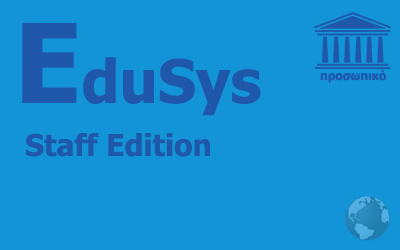
<style>
.page{position:relative;width:400px;height:250px;background:#1294d7}
.page>*{position:absolute;margin:0}
.t1{font:60px "Tahoma-Bold";color:#1f57aa}
.t2{font:110px "Tahoma-Bold";color:#1f57aa}
.t3{font:12px "Tahoma-Bold";color:#1f57aa}
.t4{font:30px "Tahoma-Bold";color:#1f57aa}
</style>
<div class="page">
<p class="t1" style="left:22px;top:23px;width:239px;height:93px"><span class="t2">E</span>duSys</p>
<p class="t3" style="left:320px;top:70px;width:66px;height:13px">προσωπικό</p>
<p class="t4" style="left:26px;top:133px;width:184px;height:24px">Staff Edition</p>
</div>
